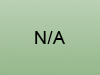
<style>
.page{position:relative;width:100px;height:75px}
.page>*{position:absolute;margin:0}
.t1{font:18px "ArialMT";letter-spacing:0.03em;color:#000100}
</style>
<div class="page">
<p class="t1" style="left:35px;top:31px;width:30px;height:13px">N/A</p>
</div>
